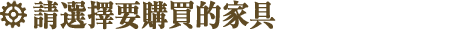
<style>
.page{position:relative;width:469px;height:30px;background:#ffffff}
.page>*{position:absolute;margin:0}
.t1{font:30px "RyuminPr6N-ExBold";color:#5f4a23;font-weight:bold;scale:0.9 1}
</style>
<div class="page">
<p class="t1" style="left:33px;top:0px;width:243px;height:30px">請選擇要購買的家具</p>
</div>
